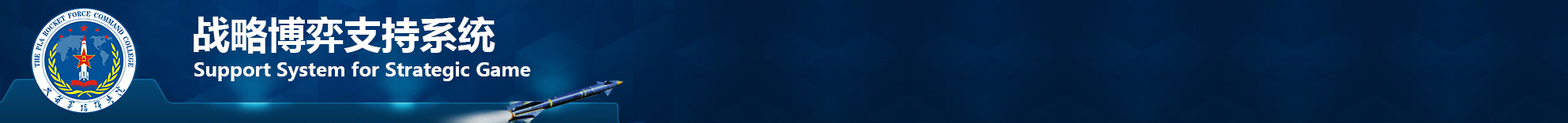
<style>
.page{position:relative;width:1568px;height:123px}
.page>*{position:absolute;margin:0}
.t1{font:37.9px "MicrosoftYaHei-Bold";color:#ffffff}
.t2{font:19px "MicrosoftYaHei-Bold";color:#ffffff}
</style>
<div class="page">
<p class="t1" style="left:194px;top:17px;width:301px;height:37px">战略博弈支持系统</p>
<p class="t2" style="left:194px;top:62px;width:337px;height:19px">Support System for Strategic Game</p>
</div>
